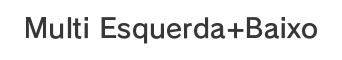
<style>
.page{position:relative;width:342px;height:60px;background:#ffffff}
.page>*{position:absolute;margin:0}
.t1{font:26.7px "RodinPro-DB";letter-spacing:0.008em;color:#383738}
</style>
<div class="page">
<p class="t1" style="left:26px;top:17px;width:291px;height:27px">Multi Esquerda+Baixo</p>
</div>
